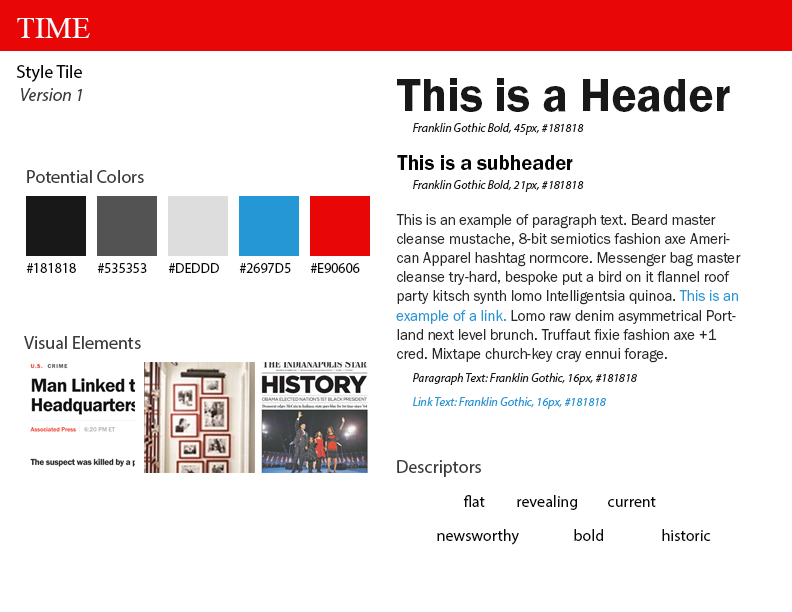
<style>
.page{position:relative;width:792px;height:612px;background:#fefffe}
.page>*{position:absolute;margin:0}
.t1{font:30px "TimesNewRomanPSMT";color:#f9fbfc}
.t2{font:18px "MyriadPro-Regular";color:#060606}
.t3{font:48px "FranklinGothicURW-Dem";color:#181818}
.t4{font:18px "MyriadPro-It";color:#3b3c3c}
.t5{font:12px "MyriadPro-It";color:#181818}
.t6{font:21px "FranklinGothicURW-Dem";color:#060606}
.t7{font:18px "MyriadPro-Regular";color:#3b3c3c}
.t8{font:16px "FranklinGothicURW-Boo";color:#282828;scale:0.93 1}
.t9{font:16px "FranklinGothicURW-Boo";color:#2697d5;scale:0.93 1}
.t10{font:14px "MyriadPro-Regular";color:#070707}
.t11{font:12px "MyriadPro-It";color:#2697d5}
.t12{font:16px "MyriadPro-Regular";color:#070707}
</style>
<div class="page">
<p class="t1" style="left:17px;top:18px;width:73px;height:20px">TIME</p>
<p class="t2" style="left:17px;top:65px;width:65px;height:17px">Style Tile</p>
<p class="t3" style="left:397px;top:78px;width:333px;height:34px">This is a Header</p>
<p class="t4" style="left:21px;top:88px;width:61px;height:13px">Version 1</p>
<p class="t5" style="left:413px;top:123px;width:171px;height:12px">Franklin Gothic Bold, 45px, #181818</p>
<p class="t6" style="left:397px;top:155px;width:176px;height:15px">This is a subheader</p>
<p class="t7" style="left:27px;top:170px;width:117px;height:13px">Potential Colors</p>
<p class="t5" style="left:413px;top:180px;width:171px;height:12px">Franklin Gothic Bold, 21px, #181818</p>
<p class="t8" style="left:396px;top:214px;width:345px;height:149px">This is an example of paragraph text. Beard master cleanse mustache, 8-bit semiotics fashion axe American Apparel hashtag normcore. Messenger bag master cleanse try-hard, bespoke put a bird on it flannel roof party kitsch synth lomo Intelligentsia quinoa. <span class="t9">This is an example of a link.</span> Lomo raw denim asymmetrical Portland next level brunch. Truffaut fixie fashion axe +1 cred. Mixtape church-key cray ennui forage.</p>
<p class="t10" style="left:26px;top:263px;width:50px;height:10px">#181818</p>
<p class="t10" style="left:97px;top:263px;width:50px;height:10px">#535353</p>
<p class="t10" style="left:168px;top:263px;width:51px;height:10px">#DEDDDD</p>
<p class="t10" style="left:239px;top:263px;width:52px;height:10px">#2697D5</p>
<p class="t10" style="left:310px;top:263px;width:50px;height:10px">#E90606</p>
<p class="t7" style="left:24px;top:336px;width:117px;height:13px">Visual Elements</p>
<p class="t5" style="left:413px;top:373px;width:224px;height:12px">Paragraph Text: Franklin Gothic, 16px, #181818</p>
<p class="t11" style="left:413px;top:397px;width:193px;height:12px">Link Text: Franklin Gothic, 16px, #181818</p>
<p class="t7" style="left:397px;top:460px;width:84px;height:17px">Descriptors</p>
<p class="t12" style="left:463px;top:495px;width:22px;height:12px">flat</p>
<p class="t12" style="left:517px;top:495px;width:60px;height:15px">revealing</p>
<p class="t12" style="left:608px;top:496px;width:48px;height:11px">current</p>
<p class="t12" style="left:437px;top:529px;width:82px;height:16px">newsworthy</p>
<p class="t12" style="left:574px;top:529px;width:29px;height:12px">bold</p>
<p class="t12" style="left:662px;top:529px;width:49px;height:12px">historic</p>
</div>
